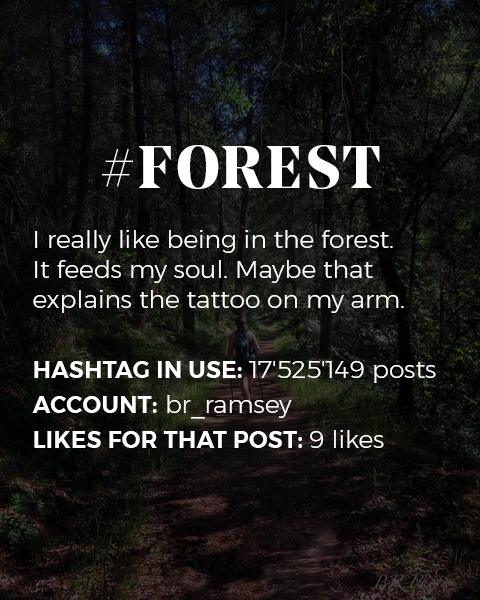
<style>
.page{position:relative;width:480px;height:600px}
.page>*{position:absolute;margin:0}
.t1{font:25px "Montserrat-Light";color:#ffffff}
.t2{font:60px/35px "NoeDisplay-Bold";letter-spacing:0.05em;color:#ffffff;text-transform:uppercase}
.t3{font:23px/35px "Montserrat-SemiBold";letter-spacing:0.02em;color:#ffffff;text-transform:uppercase}
.t4{font:25px/35px "Montserrat-Light";color:#ffffff}
</style>
<div class="page">
<p class="t1" style="left:32px;top:145px;width:404px;height:303px;text-align:center"><span class="t2">#forest<br><br></span>I really like being in the forest. <br>It feeds my soul. Maybe that <br>explains the tattoo on my arm.<br><span class="t3"><br>Hashtag in use: </span><span class="t4">17'525'149 posts<br></span><span class="t3">Account:</span><span class="t4"> br_ramsey<br></span><span class="t3">Likes for that post: </span><span class="t4">9 likes</span></p>
</div>
